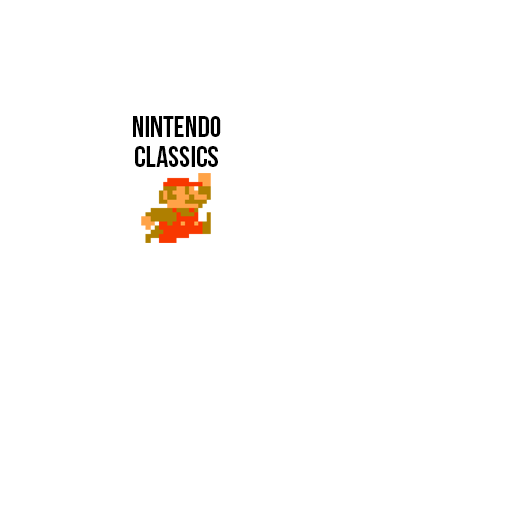
<style>
.page{position:relative;width:512px;height:512px;background:#ffffff}
.page>*{position:absolute;margin:0}
.t1{font:30px/30px "BebasNeue";color:#000000}
</style>
<div class="page">
<p class="t1" style="left:133px;top:116px;width:88px;height:51px;text-align:center">nintendo<br>classics</p>
</div>
